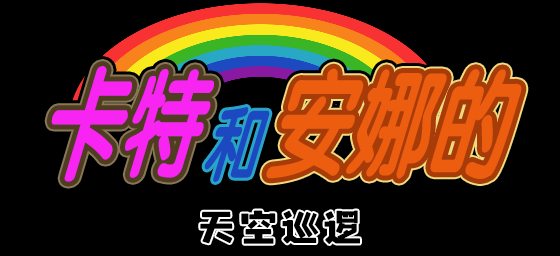
<style>
.page{position:relative;width:560px;height:256px;background:#000000}
.page>*{position:absolute;margin:0}
.t1{font:125.3px "FZY4K--GBK1-0";color:#f824f2;scale:0.64 1}
.t2{font:125.3px "FZY4K--GBK1-0";color:#ed5d10;scale:0.64 1}
.t3{font:87px "FZY4K--GBK1-0";color:#1d49c0;scale:0.64 1}
.t4{font:40px "yixinmengyati";letter-spacing:0.05em;color:#000000}
</style>
<div class="page">
<p class="t1" style="left:51px;top:66px;width:163px;height:116px">卡特</p>
<p class="t2" style="left:266px;top:68px;width:256px;height:111px">安娜的</p>
<p class="t3" style="left:204px;top:107px;width:66px;height:75px">和</p>
<p class="t4" style="left:200px;top:210px;width:160px;height:34px">天空巡逻</p>
</div>
